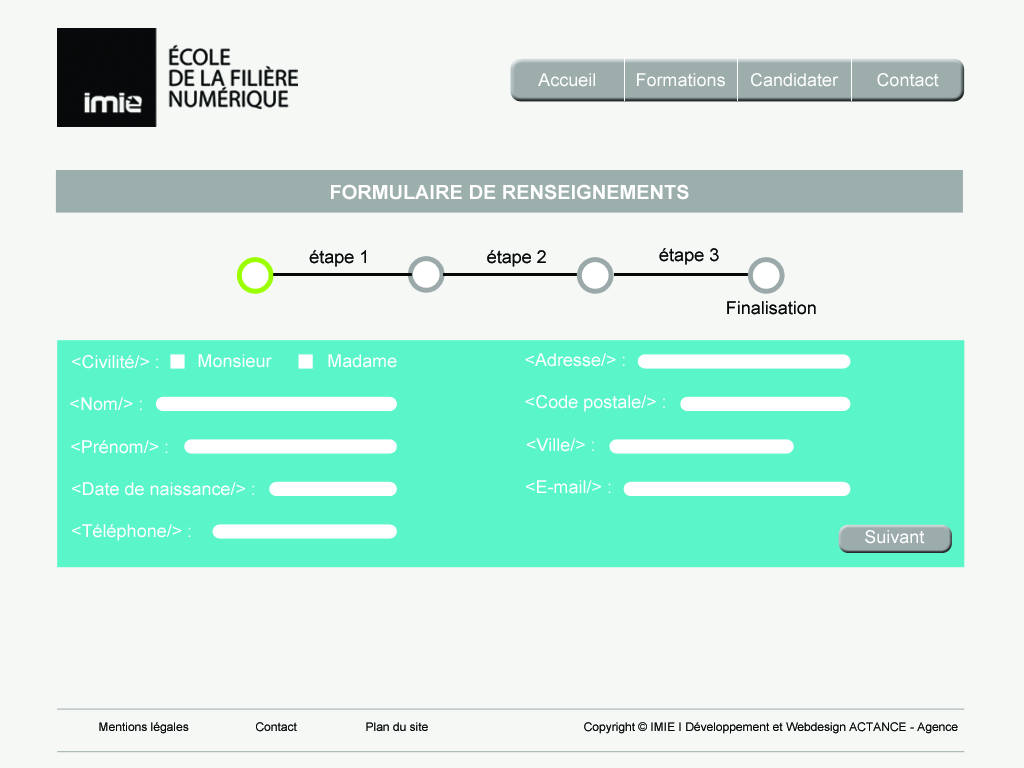
<style>
.page{position:relative;width:1024px;height:768px;background:#f6f8f6}
.page>*{position:absolute;margin:0}
.t1{font:17.6px "ArialMT";color:#ffffff}
.t2{font:19.6px "Arial-BoldMT";color:#ffffff}
.t3{font:17.6px "ArialMT";color:#060808}
.t4{font:11.8px "ArialMT";color:#060808}
</style>
<div class="page">
<p class="t1" style="left:538px;top:73px;width:57px;height:14px">Accueil</p>
<p class="t1" style="left:751px;top:73px;width:88px;height:14px">Candidater</p>
<p class="t1" style="left:877px;top:73px;width:62px;height:14px">Contact</p>
<p class="t2" style="left:331px;top:184px;width:358px;height:16px">FORMULAIRE DE RENSEIGNEMENTS</p>
<p class="t3" style="left:309px;top:250px;width:57px;height:17px">étape 1</p>
<p class="t3" style="left:487px;top:250px;width:59px;height:17px">étape 2</p>
<p class="t3" style="left:659px;top:248px;width:60px;height:17px">étape 3</p>
<p class="t3" style="left:727px;top:301px;width:89px;height:14px">Finalisation</p>
<p class="t1" style="left:525px;top:353px;width:100px;height:14px">&lt;Adresse/&gt; :</p>
<p class="t1" style="left:72px;top:355px;width:86px;height:14px">&lt;Civilité/&gt; :</p>
<p class="t1" style="left:198px;top:354px;width:74px;height:14px">Monsieur</p>
<p class="t1" style="left:328px;top:354px;width:69px;height:14px">Madame</p>
<p class="t1" style="left:70px;top:397px;width:72px;height:14px">&lt;Nom/&gt; :</p>
<p class="t1" style="left:525px;top:395px;width:140px;height:17px">&lt;Code postale/&gt; :</p>
<p class="t1" style="left:526px;top:438px;width:68px;height:14px">&lt;Ville/&gt; :</p>
<p class="t1" style="left:71px;top:440px;width:97px;height:14px">&lt;Prénom/&gt; :</p>
<p class="t1" style="left:72px;top:482px;width:182px;height:14px">&lt;Date de naissance/&gt; :</p>
<p class="t1" style="left:526px;top:480px;width:85px;height:14px">&lt;E-mail/&gt; :</p>
<p class="t1" style="left:72px;top:524px;width:119px;height:17px">&lt;Téléphone/&gt; :</p>
<p class="t1" style="left:865px;top:530px;width:60px;height:14px">Suivant</p>
<p class="t4" style="left:99px;top:722px;width:90px;height:12px">Mentions légales</p>
<p class="t4" style="left:256px;top:722px;width:41px;height:10px">Contact</p>
<p class="t4" style="left:366px;top:722px;width:62px;height:9px">Plan du site</p>
<p class="t4" style="left:584px;top:722px;width:374px;height:12px">Copyright © IMIE I Développement et Webdesign ACTANCE - Agence Marketing IT</p>
</div>
